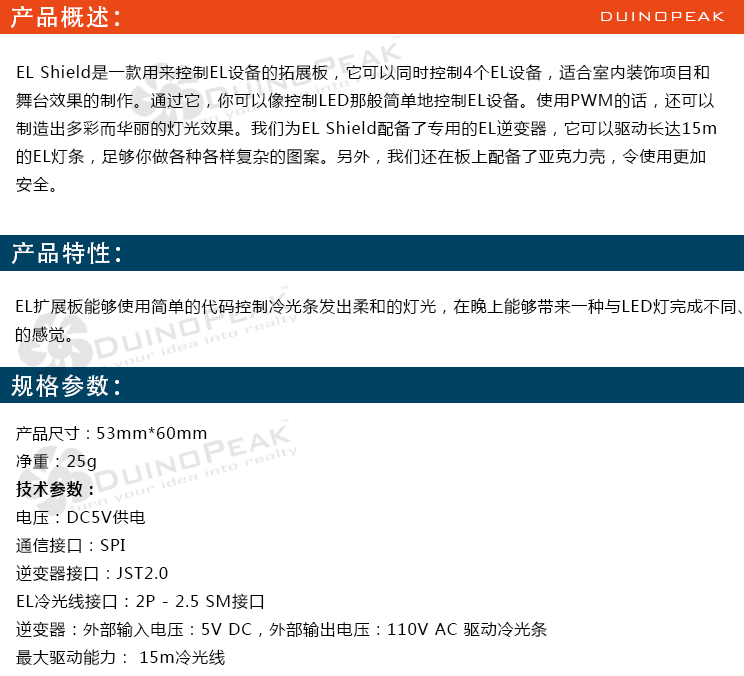
<style>
.page{position:relative;width:744px;height:676px;background:#ffffff}
.page>*{position:absolute;margin:0}
.t1{font:24px "AdobeHeitiStd-Regular";letter-spacing:0.05em;color:#ffffff}
.t2{font:18px "BankGothicBT-Light";letter-spacing:0.05em;color:#ffffff}
.t3{font:16px "MicrosoftYaHei";letter-spacing:0.05em;color:#000000}
.t4{font:16px "MicrosoftYaHei";color:#000000}
.t5{font:16px "MicrosoftYaHei-Bold";letter-spacing:0.05em;color:#000000}
</style>
<div class="page">
<p class="t1" style="left:10px;top:6px;width:109px;height:23px">产品概述：</p>
<p class="t2" style="left:601px;top:12px;width:124px;height:9px">DUINOPEAK</p>
<p class="t3" style="left:16px;top:64px;width:700px;height:128px">EL Shield是一款用来控制EL设备的拓展板，它可以同时控制4个EL设备，适合室内装饰项目和<br>舞台效果的制作。通过它，你可以像控制LED那般简单地控制EL设备。使用PWM的话，还可以<br>制造出多彩而华丽的灯光效果。我们为EL Shield配备了专用的EL逆变器，它可以驱动长达15m<br>的EL灯条，足够你做各种各样复杂的图案。另外，我们还在板上配备了亚克力壳，令使用更加<br>安全。</p>
<p class="t1" style="left:11px;top:241px;width:109px;height:24px">产品特性：</p>
<p class="t3" style="left:15px;top:298px;width:728px;height:44px">EL扩展板能够使用简单的代码控制冷光条发出柔和的灯光，在晚上能够带来一种与LED灯完成不同、<br>的感觉。</p>
<p class="t1" style="left:11px;top:374px;width:108px;height:23px">规格参数：</p>
<p class="t3" style="left:16px;top:426px;width:531px;height:240px"><span class="t4">产品尺寸：</span>53mm*60mm<br>净重：25g<br><span class="t5">技术参数：<br></span>电压：DC5V供电<br>通信接口：SPI<br>逆变器接口：JST2.0<br>EL冷光线接口：2P - 2.5 SM接口<br>逆变器：外部输入电压：5V DC，外部输出电压：110V AC 驱动冷光条<br>最大驱动能力： 15m冷光线</p>
</div>
